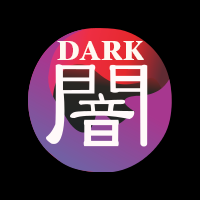
<style>
.page{position:relative;width:200px;height:200px;background:#000000}
.page>*{position:absolute;margin:0}
.t1{font:27px "StoneSerifLT-Bold";color:#fffaf1}
</style>
<div class="page">
<p class="t1" style="left:57px;top:41px;width:87px;height:19px">DARK</p>
</div>
